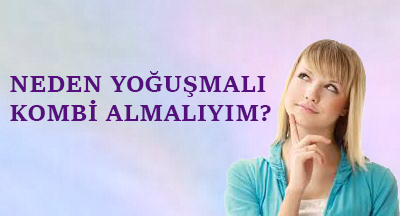
<style>
.page{position:relative;width:400px;height:216px}
.page>*{position:absolute;margin:0}
.t1{font:24px "SitkaSmall-Bold";color:#56107e}
</style>
<div class="page">
<p class="t1" style="left:10px;top:71px;width:261px;height:50px">NEDEN YOĞUŞMALI <br>KOMBİ ALMALIYIM?</p>
</div>
